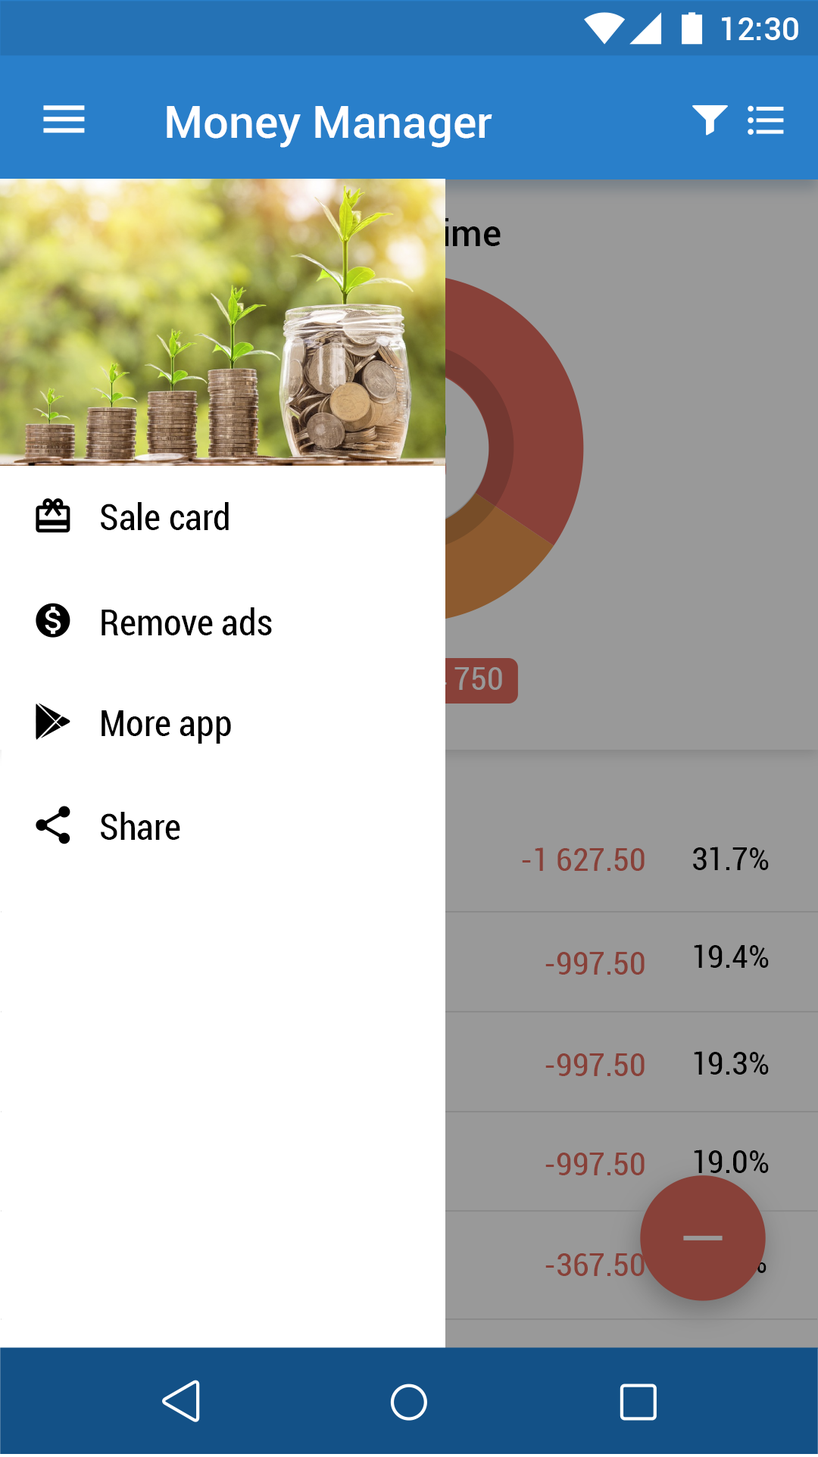
<style>
.page{position:relative;width:818px;height:1457px;background:#ffffff}
.page>*{position:absolute;margin:0}
.t1{font:31.8px "Roboto-Medium";color:#ffffff}
.t2{font:45.4px "Roboto-Medium";color:#ffffff}
.t3{font:36.5px "Roboto-Medium"}
.t4{font:36.4px "Roboto-Condensed";color:#000000}
.t5{font:31.8px "Roboto-Condensed";color:#884139}
.t6{font:31.8px "Roboto-Condensed";color:#000000}
</style>
<div class="page">
<p class="t1" style="left:722px;top:17px;width:76px;height:23px">12:30</p>
<p class="t2" style="left:167px;top:106px;width:325px;height:42px">Money Manager</p>
<p class="t3" style="left:317px;top:218px;width:184px;height:28px">All the time</p>
<p class="t4" style="left:101px;top:502px;width:128px;height:28px">Sale card</p>
<p class="t4" style="left:102px;top:608px;width:170px;height:28px">Remove ads</p>
<p class="t4" style="left:102px;top:711px;width:129px;height:33px">More app</p>
<p class="t4" style="left:101px;top:812px;width:79px;height:28px">Share</p>
<p class="t5" style="left:522px;top:848px;width:123px;height:23px">-1 627.50</p>
<p class="t6" style="left:693px;top:847px;width:76px;height:23px">31.7%</p>
<p class="t5" style="left:545px;top:952px;width:100px;height:23px">-997.50</p>
<p class="t6" style="left:694px;top:945px;width:75px;height:23px">19.4%</p>
<p class="t5" style="left:545px;top:1054px;width:100px;height:22px">-997.50</p>
<p class="t6" style="left:694px;top:1051px;width:75px;height:24px">19.3%</p>
<p class="t5" style="left:545px;top:1153px;width:100px;height:23px">-997.50</p>
<p class="t6" style="left:694px;top:1150px;width:75px;height:23px">19.0%</p>
<p class="t5" style="left:545px;top:1254px;width:100px;height:22px">-367.50</p>
</div>
